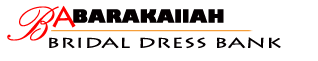
<style>
.page{position:relative;width:318px;height:61px;background:#ffffff}
.page>*{position:absolute;margin:0}
.t1{font:60px "PalaceScriptMT";color:#fd0000;font-weight:bold}
.t2{font:33.2px "LithosPro-Regular";color:#ff0000}
.t3{font:18px "GillSans-UltraBold";color:#040001}
.t4{font:14px "LithosPro-Regular";color:#040001;scale:1.59 1}
</style>
<div class="page">
<p class="t1" style="left:7px;top:6px;width:52px;height:35px">B</p>
<p class="t2" style="left:52px;top:5px;width:24px;height:23px">a</p>
<p class="t3" style="left:73px;top:9px;width:151px;height:14px">BARAKAllAH</p>
<p class="t4" style="left:49px;top:37px;width:232px;height:12px">BRIDAL DRESS BANK</p>
</div>
